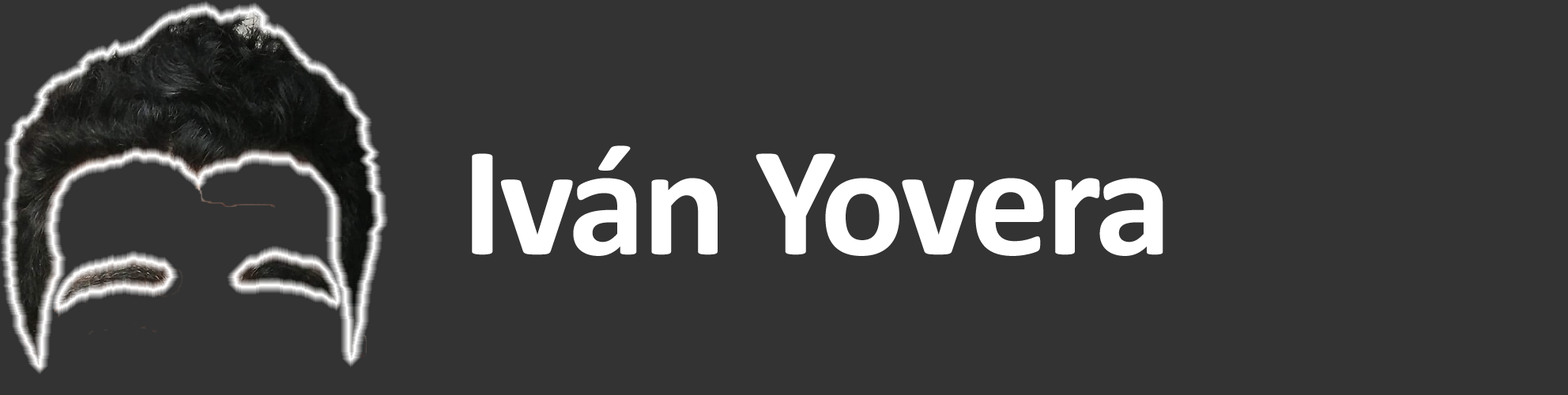
<style>
.page{position:relative;width:1568px;height:395px;background:#333333}
.page>*{position:absolute;margin:0}
.t1{font:158.1px "Calibri-Bold";letter-spacing:-0.025em;color:#ffffff}
</style>
<div class="page">
<p class="t1" style="left:472px;top:145px;width:691px;height:111px">Iván Yovera</p>
</div>
